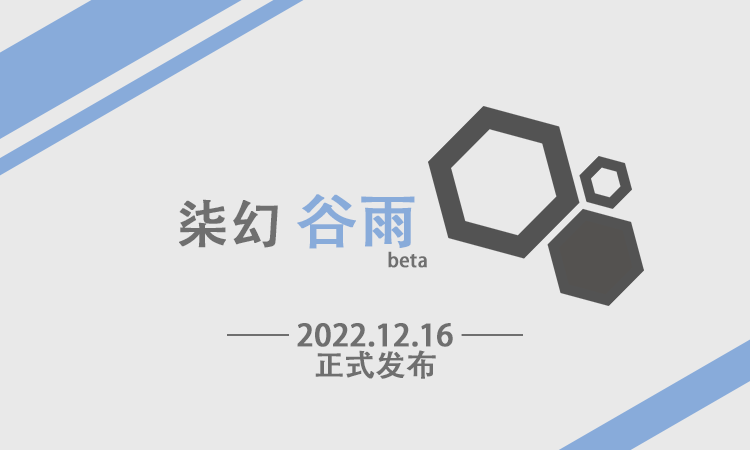
<style>
.page{position:relative;width:750px;height:450px;background:#e9e9e9}
.page>*{position:absolute;margin:0}
.t1{font:19px/60px "AdobeHeitiStd-Regular";color:#6f6f6f;font-weight:bold}
.t2{font:52px/60px "AdobeHeitiStd-Regular";color:#6f6f6f;font-weight:bold}
.t3{font:60px/60px "AdobeHeitiStd-Regular";color:#88abda;font-weight:bold}
.t4{font:30px/30px "AdobeHeitiStd-Regular";color:#6f6f6f;font-weight:bold}
</style>
<div class="page">
<p class="t1" style="left:179px;top:194px;width:248px;height:74px"><span class="t2">柒幻 </span><span class="t3">谷雨<br></span>beta</p>
<p class="t4" style="left:227px;top:323px;width:296px;height:56px;text-align:center">—— 2022.12.16 ——<br>正式发布</p>
</div>
